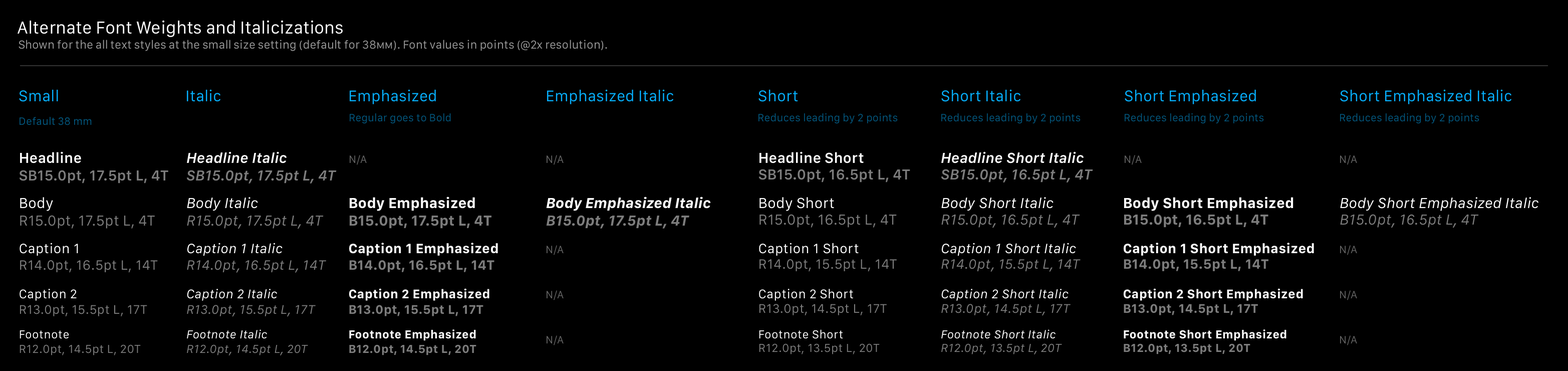
<style>
.page{position:relative;width:1568px;height:371px;background:#000000}
.page>*{position:absolute;margin:0}
.t1{font:18px "SanFranciscoText-Regular";letter-spacing:-0.005em;color:#ffffff}
.t2{font:12px "SanFranciscoText-Regular";letter-spacing:-0.005em;color:#999999}
.t3{font:12px "SanFranciscoText-Regular";letter-spacing:-0.005em;color:#999999;font-variant:small-caps}
.t4{font:16px "SanFranciscoText-Regular";color:#06b0ff}
.t5{font:11px "SanFranciscoText-Regular";color:#03567d}
.t6{font:11px "SanFranciscoText-Regular";color:#035880}
.t7{font:15px/17.5px "SanFranciscoText-Semibold";letter-spacing:0.004em;color:#7d7d7d}
.t8{font:15px/17.5px "SanFranciscoText-Semibold";letter-spacing:0.004em;color:#ffffff}
.t9{font:15px/17.5px "SanFranciscoText-SemiboldItalic";letter-spacing:0.004em;color:#7d7d7d}
.t10{font:15px/17.5px "SanFranciscoText-SemiboldItalic";letter-spacing:0.004em;color:#ffffff}
.t11{font:11px "SanFranciscoText-Regular";color:#666666}
.t12{font:15px/16.5px "SanFranciscoText-Semibold";letter-spacing:0.004em;color:#7d7d7d}
.t13{font:15px/16.5px "SanFranciscoText-Semibold";letter-spacing:0.004em;color:#ffffff}
.t14{font:15px/16.5px "SanFranciscoText-SemiboldItalic";letter-spacing:0.004em;color:#7d7d7d}
.t15{font:15px/16.5px "SanFranciscoText-SemiboldItalic";letter-spacing:0.004em;color:#ffffff}
.t16{font:15px/17.5px "SanFranciscoText-Regular";letter-spacing:0.004em;color:#7d7d7d}
.t17{font:15px/17.5px "SanFranciscoText-Regular";letter-spacing:0.004em;color:#ffffff}
.t18{font:15px/17.5px "SanFranciscoText-Italic";letter-spacing:0.004em;color:#7d7d7d}
.t19{font:15px/17.5px "SanFranciscoText-Italic";letter-spacing:0.004em;color:#ffffff}
.t20{font:15px/17.5px "SanFranciscoText-Bold";letter-spacing:0.004em;color:#7d7d7d}
.t21{font:15px/17.5px "SanFranciscoText-Bold";letter-spacing:0.004em;color:#ffffff}
.t22{font:15px/17.5px "SanFranciscoText-BoldItalic";letter-spacing:0.004em;color:#ffffff}
.t23{font:15px/17.5px "SanFranciscoText-BoldItalic";letter-spacing:0.004em;color:#7d7d7d}
.t24{font:15px/16.5px "SanFranciscoText-Regular";letter-spacing:0.004em;color:#7d7d7d}
.t25{font:15px/16.5px "SanFranciscoText-Regular";letter-spacing:0.004em;color:#ffffff}
.t26{font:15px/16.5px "SanFranciscoText-Italic";letter-spacing:0.004em;color:#7d7d7d}
.t27{font:15px/16.5px "SanFranciscoText-Italic";letter-spacing:0.004em;color:#ffffff}
.t28{font:15px/16.5px "SanFranciscoText-Bold";letter-spacing:0.004em;color:#ffffff}
.t29{font:15px/16.5px "SanFranciscoText-Bold";letter-spacing:0.004em;color:#7d7d7d}
.t30{font:14px/16.5px "SanFranciscoText-Regular";letter-spacing:0.014em;color:#7d7d7d}
.t31{font:14px/16.5px "SanFranciscoText-Regular";letter-spacing:0.014em;color:#ffffff}
.t32{font:14px/16.5px "SanFranciscoText-Italic";letter-spacing:0.014em;color:#7d7d7d}
.t33{font:14px/16.5px "SanFranciscoText-Italic";letter-spacing:0.014em;color:#ffffff}
.t34{font:14px/16.5px "SanFranciscoText-Bold";letter-spacing:0.014em;color:#7d7d7d}
.t35{font:14px/16.5px "SanFranciscoText-Bold";letter-spacing:0.014em;color:#ffffff}
.t36{font:14px/15.5px "SanFranciscoText-Regular";letter-spacing:0.014em;color:#7d7d7d}
.t37{font:14px/15.5px "SanFranciscoText-Regular";letter-spacing:0.014em;color:#ffffff}
.t38{font:14px/15.5px "SanFranciscoText-Italic";letter-spacing:0.014em;color:#ffffff}
.t39{font:14px/15.5px "SanFranciscoText-Italic";letter-spacing:0.014em;color:#7d7d7d}
.t40{font:14px/15.5px "SanFranciscoText-Bold";letter-spacing:0.014em;color:#ffffff}
.t41{font:14px/15.5px "SanFranciscoText-Bold";letter-spacing:0.014em;color:#7d7d7d}
.t42{font:13px/15.5px "SanFranciscoText-Regular";letter-spacing:0.017em;color:#7d7d7d}
.t43{font:13px/15.5px "SanFranciscoText-Regular";letter-spacing:0.017em;color:#ffffff}
.t44{font:13px/15.5px "SanFranciscoText-Italic";letter-spacing:0.017em;color:#7d7d7d}
.t45{font:13px/15.5px "SanFranciscoText-Italic";letter-spacing:0.017em;color:#ffffff}
.t46{font:13px/15.5px "SanFranciscoText-Bold";letter-spacing:0.017em;color:#7d7d7d}
.t47{font:13px/15.5px "SanFranciscoText-Bold";letter-spacing:0.017em;color:#ffffff}
.t48{font:13px/14.5px "SanFranciscoText-Regular";letter-spacing:0.017em;color:#7d7d7d}
.t49{font:13px/14.5px "SanFranciscoText-Regular";letter-spacing:0.017em;color:#ffffff}
.t50{font:13px/14.5px "SanFranciscoText-Italic";letter-spacing:0.017em;color:#ffffff}
.t51{font:13px/14.5px "SanFranciscoText-Italic";letter-spacing:0.017em;color:#7d7d7d}
.t52{font:13px/14.5px "SanFranciscoText-Bold";letter-spacing:0.017em;color:#ffffff}
.t53{font:13px/14.5px "SanFranciscoText-Bold";letter-spacing:0.017em;color:#7d7d7d}
.t54{font:12px/14.5px "SanFranciscoText-Italic";letter-spacing:0.02em;color:#7d7d7d}
.t55{font:12px/14.5px "SanFranciscoText-Italic";letter-spacing:0.02em;color:#ffffff}
.t56{font:12px/14.5px "SanFranciscoText-Bold";letter-spacing:0.02em;color:#7d7d7d}
.t57{font:12px/14.5px "SanFranciscoText-Bold";letter-spacing:0.02em;color:#ffffff}
.t58{font:12px/13.5px "SanFranciscoText-Regular";letter-spacing:0.02em;color:#7d7d7d}
.t59{font:12px/13.5px "SanFranciscoText-Regular";letter-spacing:0.02em;color:#ffffff}
.t60{font:12px/13.5px "SanFranciscoText-Italic";letter-spacing:0.02em;color:#7d7d7d}
.t61{font:12px/13.5px "SanFranciscoText-Italic";letter-spacing:0.02em;color:#ffffff}
.t62{font:12px/13.5px "SanFranciscoText-Bold";letter-spacing:0.02em;color:#ffffff}
.t63{font:12px/13.5px "SanFranciscoText-Bold";letter-spacing:0.02em;color:#7d7d7d}
.t64{font:12px/14.5px "SanFranciscoText-Regular";letter-spacing:0.02em;color:#7d7d7d}
.t65{font:12px/14.5px "SanFranciscoText-Regular";letter-spacing:0.02em;color:#ffffff}
</style>
<div class="page">
<p class="t1" style="left:18px;top:20px;width:325px;height:17px">Alternate Font Weights and Italicizations</p>
<p class="t2" style="left:19px;top:40px;width:588px;height:11px">Shown for the all text styles at the small size setting (default for 38<span class="t3">mm</span>). Font values in points (@2x resolution).</p>
<p class="t4" style="left:19px;top:89px;width:39px;height:13px">Small</p>
<p class="t4" style="left:187px;top:89px;width:33px;height:13px">Italic</p>
<p class="t4" style="left:350px;top:89px;width:86px;height:15px">Emphasized</p>
<p class="t4" style="left:547px;top:89px;width:126px;height:15px">Emphasized Italic</p>
<p class="t4" style="left:758px;top:89px;width:40px;height:13px">Short</p>
<p class="t4" style="left:941px;top:89px;width:79px;height:13px">Short Italic</p>
<p class="t4" style="left:1125px;top:89px;width:131px;height:15px">Short Emphasized</p>
<p class="t4" style="left:1340px;top:89px;width:171px;height:15px">Short Emphasized Italic</p>
<p class="t5" style="left:350px;top:113px;width:101px;height:11px">Regular goes to Bold</p>
<p class="t5" style="left:758px;top:113px;width:140px;height:11px">Reduces leading by 2 points</p>
<p class="t5" style="left:941px;top:113px;width:140px;height:11px">Reduces leading by 2 points</p>
<p class="t5" style="left:1125px;top:113px;width:139px;height:11px">Reduces leading by 2 points</p>
<p class="t5" style="left:1340px;top:113px;width:139px;height:11px">Reduces leading by 2 points</p>
<p class="t6" style="left:20px;top:117px;width:72px;height:8px">Default 38 mm</p>
<p class="t7" style="left:19px;top:151px;width:149px;height:32px"><span class="t8">Headline<br></span>SB15.0pt, 17.5pt L, 4T</p>
<p class="t9" style="left:186px;top:151px;width:151px;height:32px"><span class="t10">Headline Italic<br></span>SB15.0pt, 17.5pt L, 4T</p>
<p class="t11" style="left:350px;top:155px;width:17px;height:10px">N/A</p>
<p class="t11" style="left:547px;top:155px;width:17px;height:10px">N/A</p>
<p class="t12" style="left:758px;top:151px;width:152px;height:31px"><span class="t13">Headline Short<br></span>SB15.0pt, 16.5pt L, 4T</p>
<p class="t14" style="left:941px;top:151px;width:152px;height:31px"><span class="t15">Headline Short Italic<br></span>SB15.0pt, 16.5pt L, 4T</p>
<p class="t11" style="left:1125px;top:155px;width:17px;height:10px">N/A</p>
<p class="t11" style="left:1340px;top:155px;width:17px;height:10px">N/A</p>
<p class="t16" style="left:20px;top:197px;width:135px;height:31px"><span class="t17">Body<br></span>R15.0pt, 17.5pt L, 4T</p>
<p class="t18" style="left:187px;top:197px;width:137px;height:32px"><span class="t19">Body Italic<br></span>R15.0pt, 17.5pt L, 4T</p>
<p class="t20" style="left:349px;top:196px;width:143px;height:32px"><span class="t21">Body Emphasized<br></span>B15.0pt, 17.5pt L, 4T</p>
<p class="t22" style="left:546px;top:196px;width:165px;height:32px">Body Emphasized Italic<br><span class="t23">B15.0pt, 17.5pt L, 4T</span></p>
<p class="t24" style="left:759px;top:197px;width:138px;height:30px"><span class="t25">Body Short<br></span>R15.0pt, 16.5pt L, 4T</p>
<p class="t26" style="left:941px;top:197px;width:139px;height:31px"><span class="t27">Body Short Italic<br></span>R15.0pt, 16.5pt L, 4T</p>
<p class="t28" style="left:1124px;top:196px;width:169px;height:31px">Body Short Emphasized<br><span class="t29">B15.0pt, 16.5pt L, 4T</span></p>
<p class="t27" style="left:1340px;top:197px;width:198px;height:31px">Body Short Emphasized Italic<br><span class="t26">B15.0pt, 16.5pt L, 4T</span></p>
<p class="t30" style="left:20px;top:242px;width:138px;height:31px"><span class="t31">Caption 1<br></span>R14.0pt, 16.5pt L, 14T</p>
<p class="t32" style="left:187px;top:242px;width:139px;height:31px"><span class="t33">Caption 1 Italic<br></span>R14.0pt, 16.5pt L, 14T</p>
<p class="t34" style="left:349px;top:242px;width:149px;height:30px"><span class="t35">Caption 1 Emphasized<br></span>B14.0pt, 16.5pt L, 14T</p>
<p class="t11" style="left:547px;top:245px;width:17px;height:10px">N/A</p>
<p class="t36" style="left:759px;top:242px;width:138px;height:30px"><span class="t37">Caption 1 Short<br></span>R14.0pt, 15.5pt L, 14T</p>
<p class="t38" style="left:941px;top:242px;width:140px;height:30px">Caption 1 Short Italic<br><span class="t39">R14.0pt, 15.5pt L, 14T</span></p>
<p class="t40" style="left:1124px;top:242px;width:190px;height:29px">Caption 1 Short Emphasized<br><span class="t41">B14.0pt, 15.5pt L, 14T</span></p>
<p class="t11" style="left:1340px;top:245px;width:17px;height:10px">N/A</p>
<p class="t42" style="left:20px;top:289px;width:127px;height:27px"><span class="t43">Caption 2<br></span>R13.0pt, 15.5pt L, 17T</p>
<p class="t44" style="left:187px;top:289px;width:129px;height:28px"><span class="t45">Caption 2 Italic<br></span>R13.0pt, 15.5pt L, 17T</p>
<p class="t46" style="left:349px;top:288px;width:140px;height:28px"><span class="t47">Caption 2 Emphasized<br></span>B13.0pt, 15.5pt L, 17T</p>
<p class="t11" style="left:547px;top:290px;width:17px;height:10px">N/A</p>
<p class="t48" style="left:759px;top:289px;width:128px;height:26px"><span class="t49">Caption 2 Short<br></span>R13.0pt, 14.5pt L, 17T</p>
<p class="t50" style="left:941px;top:289px;width:130px;height:27px">Caption 2 Short Italic<br><span class="t51">R13.0pt, 14.5pt L, 17T</span></p>
<p class="t52" style="left:1123px;top:288px;width:180px;height:27px">Caption 2 Short Emphasized<br><span class="t53">B13.0pt, 14.5pt L, 17T</span></p>
<p class="t11" style="left:1340px;top:290px;width:17px;height:10px">N/A</p>
<p class="t54" style="left:187px;top:329px;width:121px;height:26px"><span class="t55">Footnote Italic<br></span>R12.0pt, 14.5pt L, 20T</p>
<p class="t56" style="left:349px;top:329px;width:127px;height:26px"><span class="t57">Footnote Emphasized<br></span>B12.0pt, 14.5pt L, 20T</p>
<p class="t58" style="left:759px;top:329px;width:121px;height:25px"><span class="t59">Footnote Short<br></span>R12.0pt, 13.5pt L, 20T</p>
<p class="t60" style="left:941px;top:329px;width:121px;height:25px"><span class="t61">Footnote Short Italic<br></span>R12.0pt, 13.5pt L, 20T</p>
<p class="t62" style="left:1124px;top:329px;width:162px;height:25px">Footnote Short Emphasized<br><span class="t63">B12.0pt, 13.5pt L, 20T</span></p>
<p class="t64" style="left:20px;top:330px;width:121px;height:25px"><span class="t65">Footnote<br></span>R12.0pt, 14.5pt L, 20T</p>
<p class="t11" style="left:547px;top:335px;width:17px;height:10px">N/A</p>
<p class="t11" style="left:1340px;top:335px;width:17px;height:10px">N/A</p>
</div>
